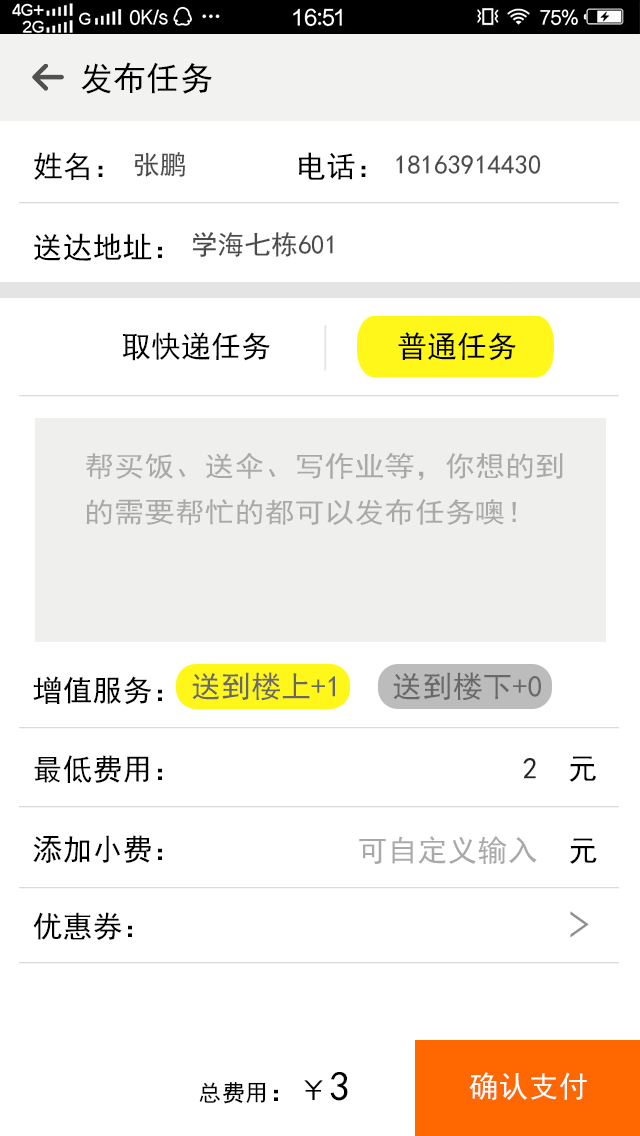
<style>
.page{position:relative;width:640px;height:1136px;background:#ffffff}
.page>*{position:absolute;margin:0}
.t1{font:33.3px "SimHei";letter-spacing:0.002em;color:#000000}
.t2{font:30px "SimHei";letter-spacing:0.002em;color:#000000}
.t3{font:26.7px "SimHei";letter-spacing:0.002em;color:#4b4b4b}
.t4{font:27.9px/46.5px "SimHei";letter-spacing:0.002em;color:#a9a9a9;scale:1.08 1}
.t5{font:30px "SimHei";letter-spacing:0.002em;color:#686868}
.t6{font:30px "SimHei";letter-spacing:0.002em;color:#262626}
.t7{font:30px "SimHei";letter-spacing:0.002em;color:#a9a9a9}
.t8{font:23.3px "SimHei";letter-spacing:0.002em;color:#000000}
.t9{font:41.7px "SimHei";letter-spacing:0.002em;color:#000000}
.t10{font:30px "SimHei";letter-spacing:0.002em;color:#ffffff}
</style>
<div class="page">
<p class="t1" style="left:81px;top:62px;width:131px;height:32px">发布任务</p>
<p class="t2" style="left:34px;top:152px;width:69px;height:28px">姓名：</p>
<p class="t3" style="left:134px;top:152px;width:51px;height:25px">张鹏</p>
<p class="t2" style="left:299px;top:152px;width:67px;height:28px">电话：</p>
<p class="t3" style="left:396px;top:155px;width:145px;height:19px">18163914430</p>
<p class="t2" style="left:34px;top:233px;width:128px;height:28px">送达地址：</p>
<p class="t3" style="left:192px;top:232px;width:141px;height:25px">学海七栋601</p>
<p class="t2" style="left:122px;top:332px;width:148px;height:29px">取快递任务</p>
<p class="t2" style="left:398px;top:332px;width:118px;height:29px">普通任务</p>
<p class="t4" style="left:86px;top:452px;width:477px;height:73px">帮买饭、送伞、写作业等，你想的到<br>的需要帮忙的都可以发布任务噢！</p>
<p class="t2" style="left:33px;top:676px;width:129px;height:29px">增值服务：</p>
<p class="t5" style="left:192px;top:672px;width:143px;height:29px">送到楼上+1</p>
<p class="t5" style="left:393px;top:672px;width:148px;height:29px">送到楼下+0</p>
<p class="t2" style="left:34px;top:755px;width:128px;height:28px">最低费用：</p>
<p class="t6" style="left:523px;top:756px;width:73px;height:26px">2  <span class="t2">元</span></p>
<p class="t2" style="left:33px;top:835px;width:129px;height:29px">添加小费：</p>
<p class="t7" style="left:359px;top:836px;width:238px;height:29px">可自定义输入<span class="t2">  元</span></p>
<p class="t2" style="left:33px;top:912px;width:99px;height:28px">优惠券：</p>
<p class="t8" style="left:199px;top:1072px;width:149px;height:32px">总费用<span class="t2">：￥</span><span class="t9">3</span></p>
<p class="t10" style="left:469px;top:1072px;width:118px;height:29px">确认支付</p>
</div>
